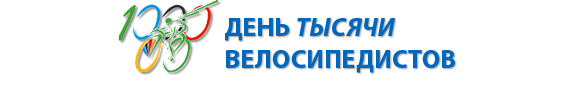
<style>
.page{position:relative;width:567px;height:96px;background:#ffffff}
.page>*{position:absolute;margin:0}
.t1{font:26.1px/32px "MyriadPro-Bold";color:#0067be}
.t2{font:26.1px/32px "MyriadPro-BoldIt";color:#0067be}
</style>
<div class="page">
<p class="t1" style="left:225px;top:18px;width:230px;height:55px">ДЕНЬ <span class="t2">ТЫСЯЧИ<br></span>ВЕЛОСИПЕДИСТОВ</p>
</div>
